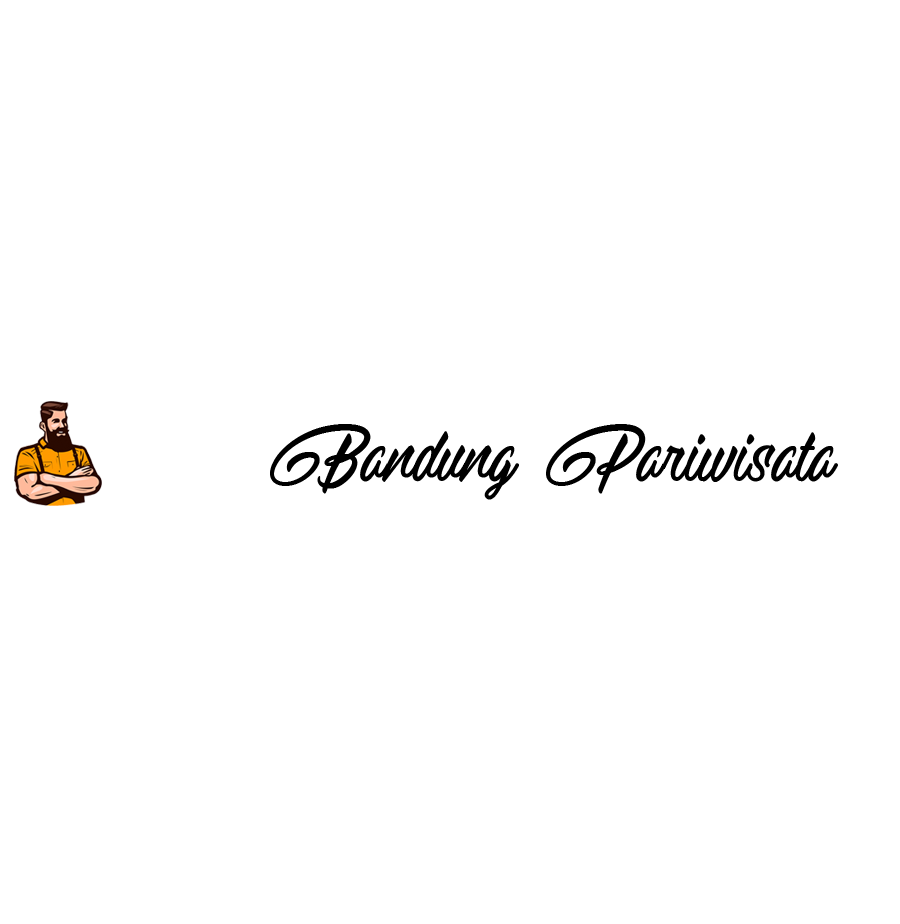
<style>
.page{position:relative;width:900px;height:924px;background:#ffffff}
.page>*{position:absolute;margin:0}
.t1{font:78px "RaitonsDemo";color:#000000;scale:0.96 1}
</style>
<div class="page">
<p class="t1" style="left:270px;top:424px;width:568px;height:76px">Bandung Pariwisata</p>
</div>
